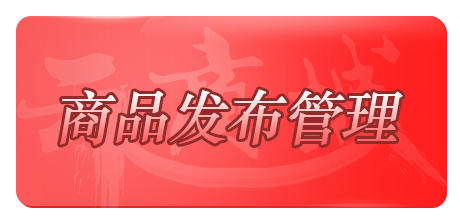
<style>
.page{position:relative;width:460px;height:220px}
.page>*{position:absolute;margin:0}
.t1{font:59px "STZhongsong";letter-spacing:-0.025em;font-style:italic}
</style>
<div class="page">
<p class="t1" style="left:60px;top:89px;width:343px;height:57px">商品发布管理</p>
</div>
